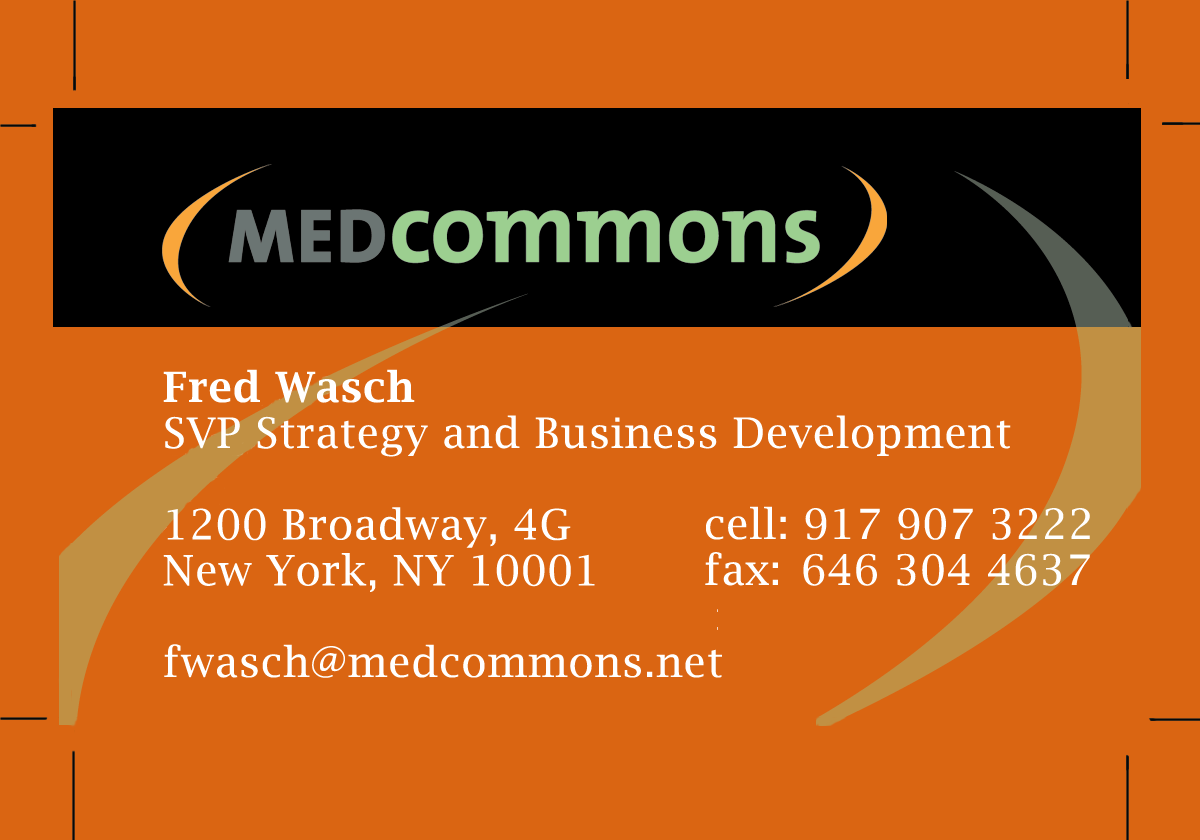
<style>
.page{position:relative;width:1200px;height:840px;background:#da6512}
.page>*{position:absolute;margin:0}
.t1{font:41.7px/45.8px "LucidaBright";letter-spacing:0.025em;color:#ffffff}
.t2{font:41.7px/45.8px "LucidaBright-Demi";letter-spacing:0.025em;color:#ffffff}
</style>
<div class="page">
<p class="t1" style="left:163px;top:369px;width:848px;height:309px"><span class="t2">Fred Wasch<br></span>SVP Strategy and Business Development<br><br>1200 Broadway, 4G<br>New York, NY 10001<br><br>fwasch@medcommons.net</p>
<p class="t1" style="left:705px;top:506px;width:385px;height:80px">cell: 917 907 3222<br>fax: 646 304 4637</p>
</div>
